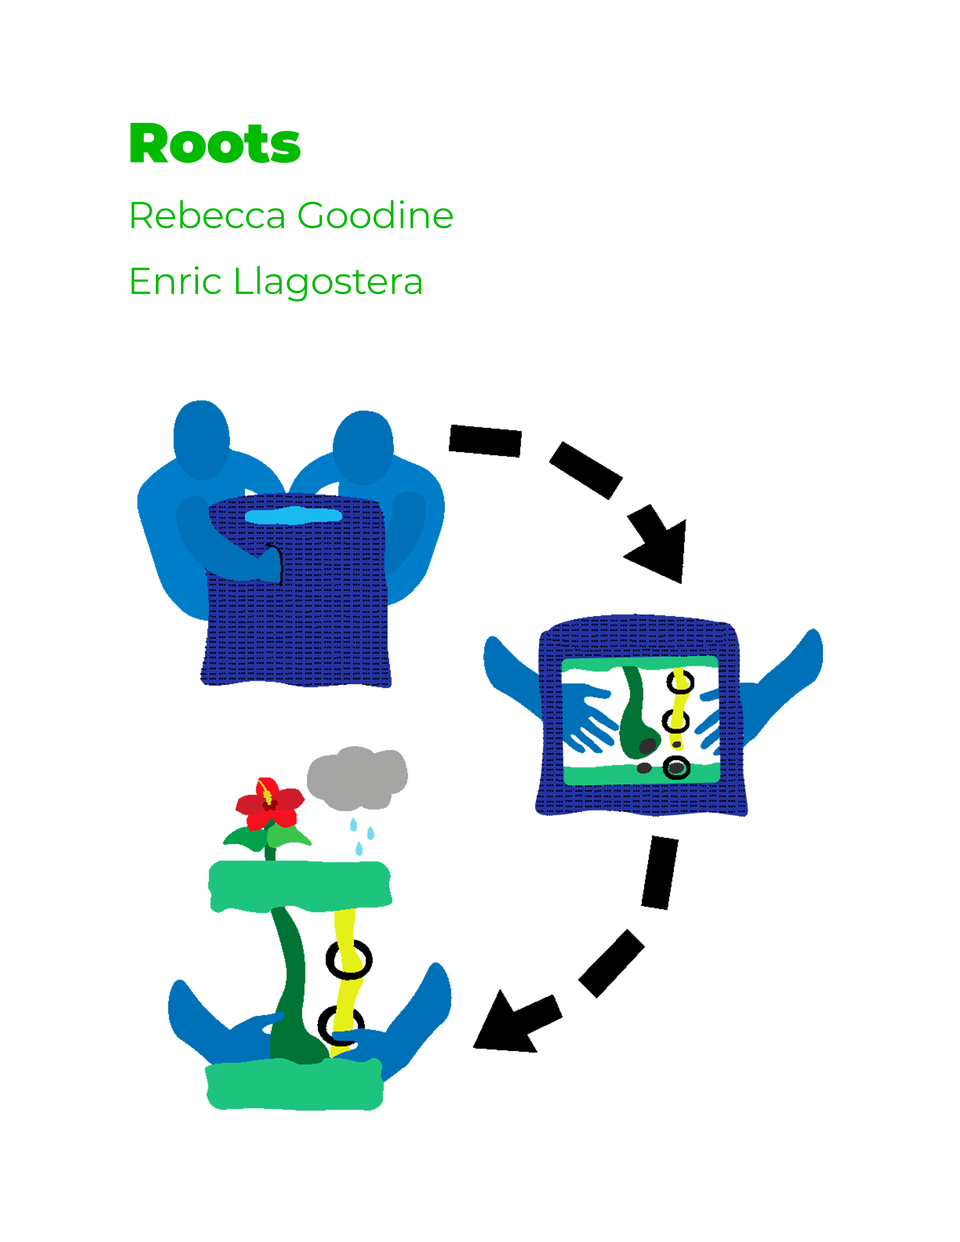
<style>
.page{position:relative;width:960px;height:1242px;background:#ffffff}
.page>*{position:absolute;margin:0}
.t1{font:37.6px/65.9px "Montserrat-Regular";letter-spacing:-0.01em;color:#00ad01}
.t2{font:56.5px/65.9px "Montserrat-Black";letter-spacing:-0.01em;color:#00ad01}
</style>
<div class="page">
<p class="t1" style="left:130px;top:123px;width:323px;height:179px"><span class="t2">Roots<br></span>Rebecca Goodine<br>Enric Llagostera</p>
</div>
